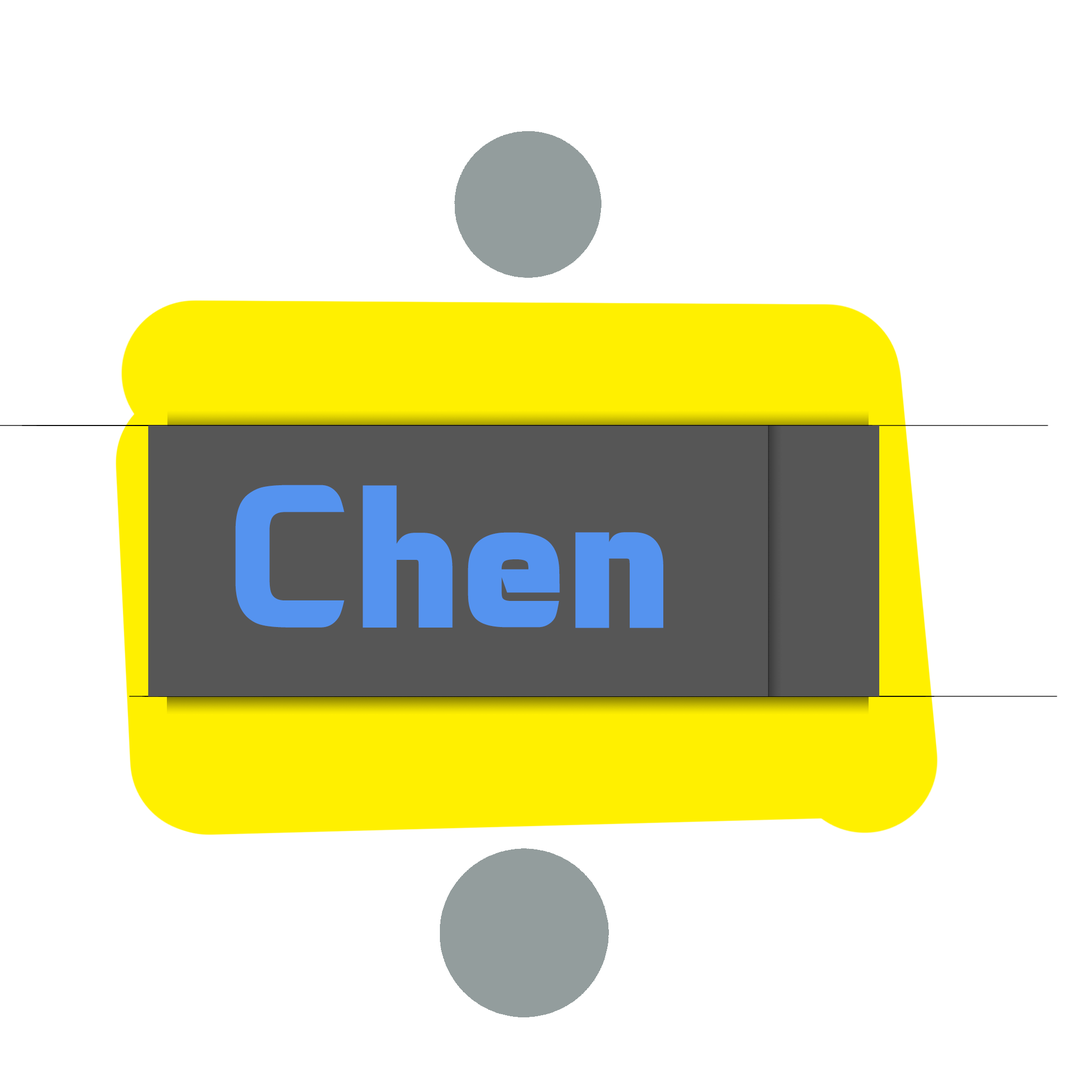
<style>
.page{position:relative;width:1092px;height:1092px;background:#ffffff}
.page>*{position:absolute;margin:0}
.t1{font:213.3px "Tensentype-ZhiHeiJ-W6";color:#5593ef}
</style>
<div class="page">
<p class="t1" style="left:235px;top:485px;width:428px;height:143px">Chen</p>
</div>
